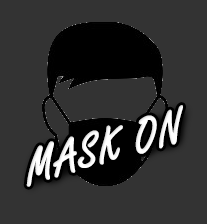
<style>
.page{position:relative;width:207px;height:224px;background:#333333}
.page>*{position:absolute;margin:0}
.t1{font:50px "FreestyleScript-Regular";color:#ffffff;font-weight:bold}
</style>
<div class="page">
<p class="t1" style="left:26px;top:105px;width:157px;height:82px;rotate:-16deg">MASK ON</p>
</div>
